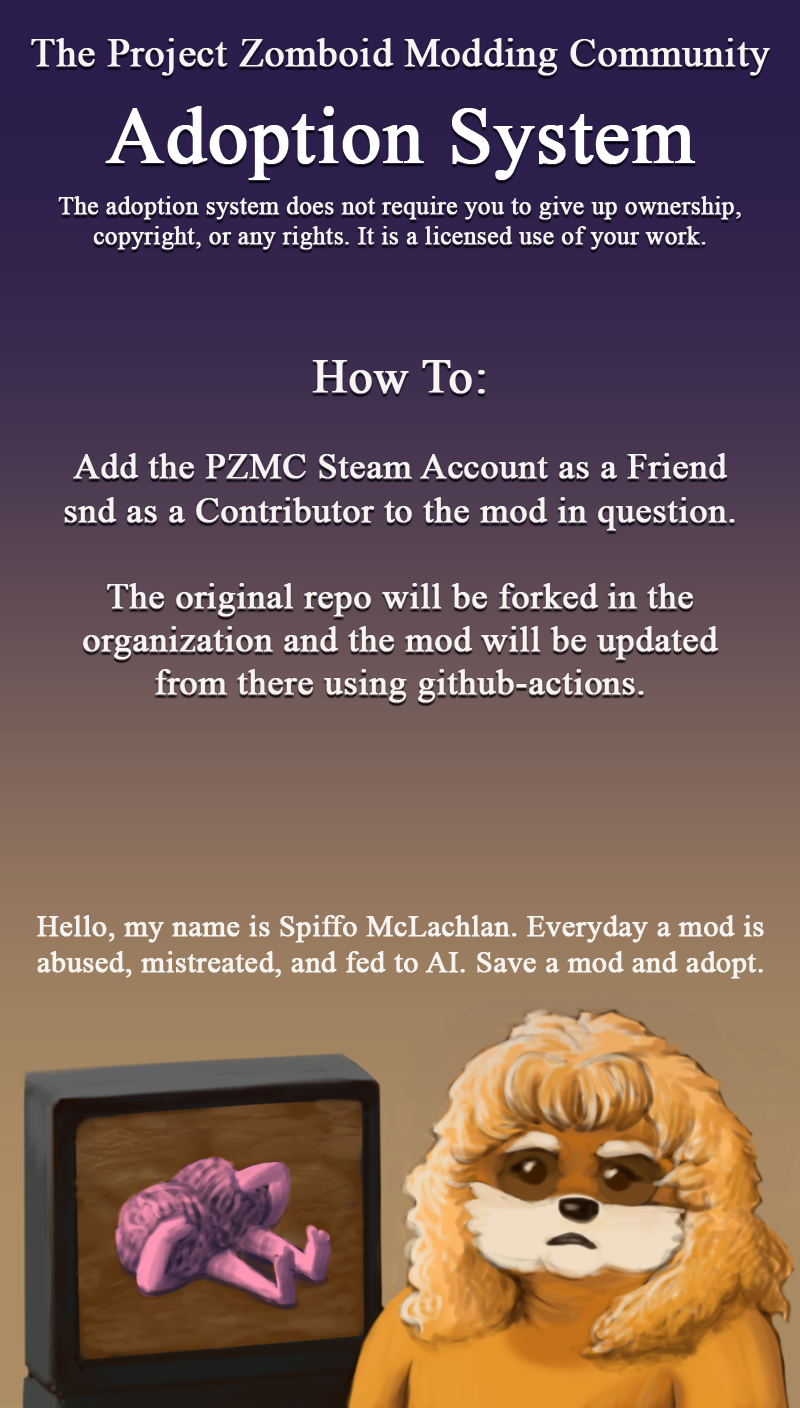
<style>
.page{position:relative;width:800px;height:1408px}
.page>*{position:absolute;margin:0}
.t1{font:40px "TimesNewRomanPSMT";color:#f7f5f2;font-weight:bold}
.t2{font:80px "TimesNewRomanPSMT";color:#ffffff;font-weight:bold}
.t3{font:25px "TimesNewRomanPSMT";color:#f7f5f2;font-weight:bold}
.t4{font:36px "TimesNewRomanPSMT";color:#f7f5f2;font-weight:bold}
.t5{font:48px "TimesNewRomanPSMT";color:#f7f5f2;font-weight:bold}
.t6{font:30px "TimesNewRomanPSMT";color:#f7f5f2;font-weight:bold}
</style>
<div class="page">
<p class="t1" style="left:31px;top:38px;width:739px;height:142px;text-align:center">The Project Zomboid Modding Community<br><span class="t2">Adoption System</span></p>
<p class="t3" style="left:58px;top:196px;width:683px;height:54px;text-align:center">The adoption system does not require you to give up ownership, copyright, or any rights. It is a licensed use of your work.</p>
<p class="t4" style="left:64px;top:360px;width:671px;height:343px;text-align:center"><span class="t5">How To:<br></span><br>Add the PZMC Steam Account as a Friend<br>snd as a Contributor to the mod in question.<br><br>The original repo will be forked in the organization and the mod will be updated from there using github-actions.</p>
<p class="t6" style="left:37px;top:915px;width:727px;height:64px;text-align:center">Hello, my name is Spiffo McLachlan. Everyday a mod is abused, mistreated, and fed to AI. Save a mod and adopt.</p>
</div>
